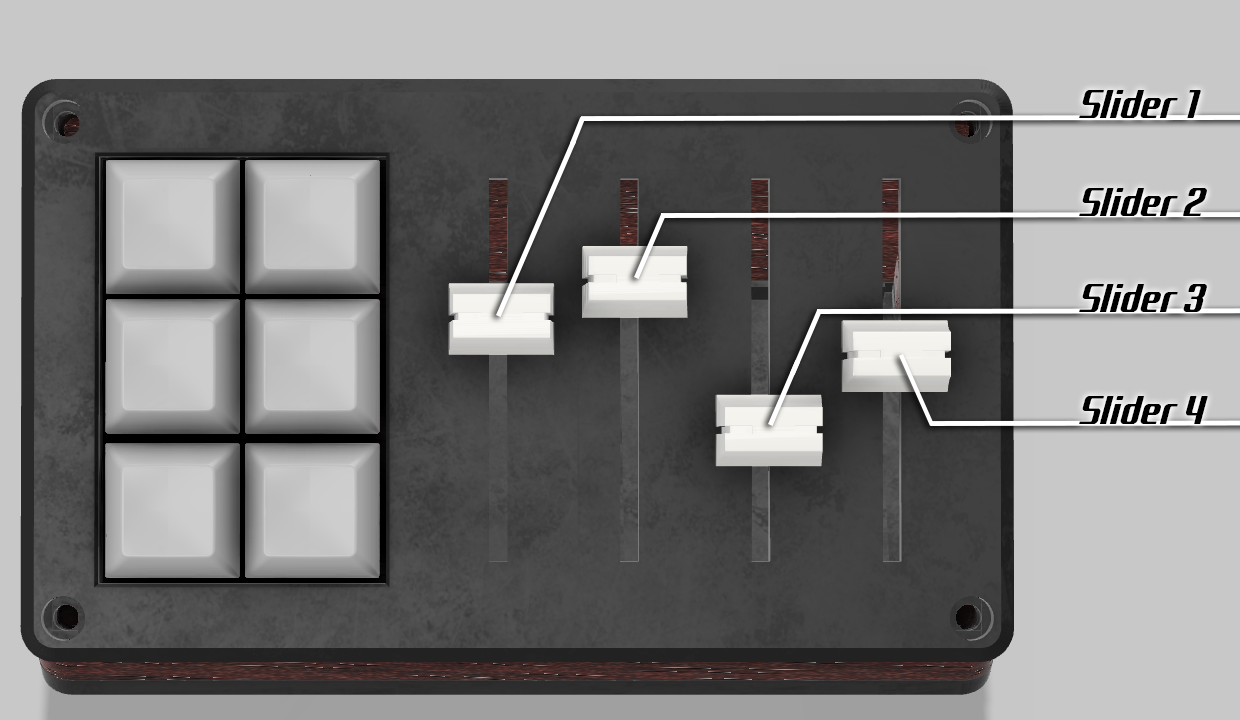
<style>
.page{position:relative;width:1240px;height:720px;background:#c8c8c8}
.page>*{position:absolute;margin:0}
.t1{font:40px "KardustTSCondensedDemoVersi-BoldItalic";color:#000000}
</style>
<div class="page">
<p class="t1" style="left:1079px;top:90px;width:122px;height:28px">Slider 1</p>
<p class="t1" style="left:1079px;top:188px;width:128px;height:28px">Slider 2</p>
<p class="t1" style="left:1079px;top:284px;width:128px;height:28px">Slider 3</p>
<p class="t1" style="left:1079px;top:396px;width:129px;height:28px">Slider 4</p>
</div>
